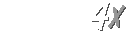
<style>
.page{position:relative;width:128px;height:32px;background:#ffffff}
.page>*{position:absolute;margin:0}
.t1{font:43px "DomDiagonalBT-Regular";letter-spacing:0.075em;color:#ffffff;scale:1.05 1}
.t2{font:29.7px "DomDiagonalBT-Regular";letter-spacing:0.075em;color:#969696}
.t3{font:29.7px "DomDiagonalBT-Regular";letter-spacing:0.075em}
</style>
<div class="page">
<p class="t1" style="left:90px;top:2px;width:20px;height:29px">4</p>
<p class="t2" style="left:108px;top:5px;width:17px;height:23px">X</p>
<p class="t3" style="left:109px;top:6px;width:17px;height:23px">X</p>
</div>
